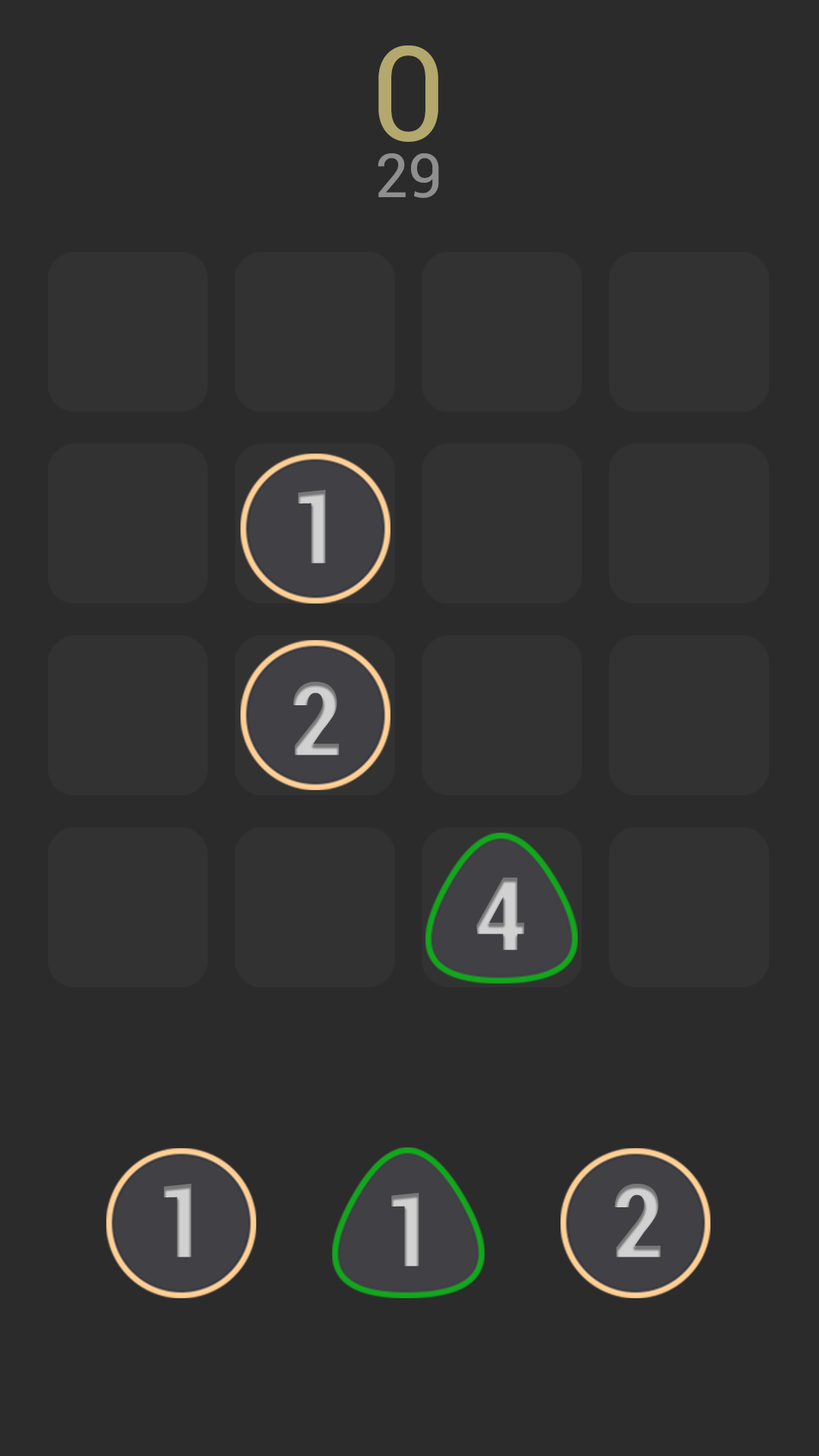
<style>
.page{position:relative;width:819px;height:1456px;background:#2b2b2b}
.page>*{position:absolute;margin:0}
.t1{font:131.4px "Roboto-Regular";color:#b3a86d}
.t2{font:60.7px "Roboto-Regular";color:#8f8f8f}
.t3{font:101.1px "Roboto-BoldCondensed";color:#d1d1d1}
</style>
<div class="page">
<p class="t1" style="left:378px;top:45px;width:60px;height:97px">0</p>
<p class="t2" style="left:378px;top:153px;width:61px;height:45px">29</p>
<p class="t3" style="left:298px;top:490px;width:28px;height:73px">1</p>
<p class="t3" style="left:293px;top:682px;width:46px;height:73px">2</p>
<p class="t3" style="left:476px;top:877px;width:49px;height:73px">4</p>
<p class="t3" style="left:164px;top:1184px;width:28px;height:73px">1</p>
<p class="t3" style="left:391px;top:1193px;width:28px;height:73px">1</p>
<p class="t3" style="left:614px;top:1184px;width:46px;height:73px">2</p>
</div>
